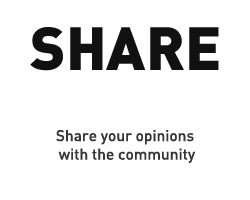
<style>
.page{position:relative;width:250px;height:200px;background:#ffffff}
.page>*{position:absolute;margin:0}
.t1{font:60px "DIN-Black";color:#111111}
.t2{font:15.5px "DIN-Medium";color:#363636}
</style>
<div class="page">
<p class="t1" style="left:30px;top:27px;width:189px;height:44px">SHARE</p>
<p class="t2" style="left:56px;top:130px;width:140px;height:33px;text-align:center">Share your opinions <br>with the community</p>
</div>
